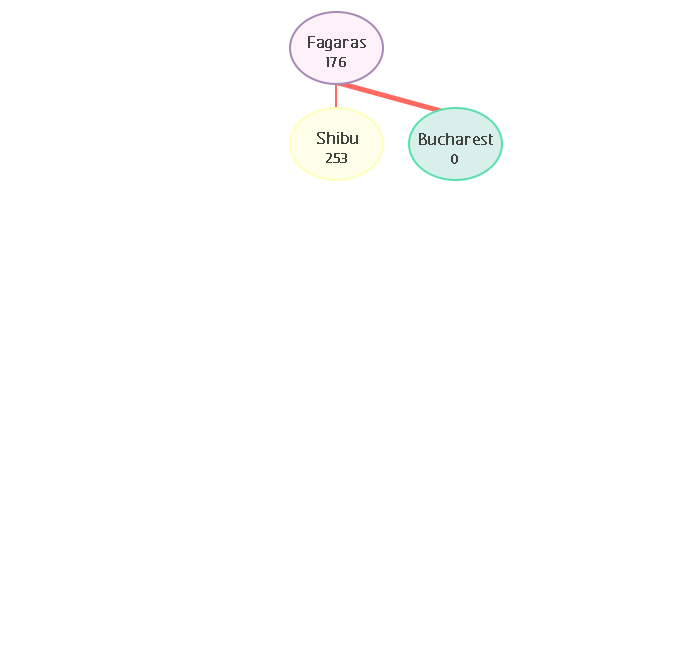
<style>
.page{position:relative;width:674px;height:660px;background:#ffffff}
.page>*{position:absolute;margin:0}
.t1{font:20.8px "FCActiveRegular";color:#424242;font-weight:bold}
.t2{font:16.7px "FCActiveRegular";color:#424141;font-weight:bold}
</style>
<div class="page">
<p class="t1" style="left:308px;top:36px;width:58px;height:15px">Fagaras</p>
<p class="t2" style="left:326px;top:57px;width:20px;height:10px">176</p>
<p class="t1" style="left:317px;top:132px;width:41px;height:12px">Shibu</p>
<p class="t1" style="left:419px;top:133px;width:74px;height:12px">Bucharest</p>
<p class="t2" style="left:326px;top:153px;width:21px;height:10px">253</p>
<p class="t2" style="left:451px;top:154px;width:7px;height:10px">0</p>
</div>
